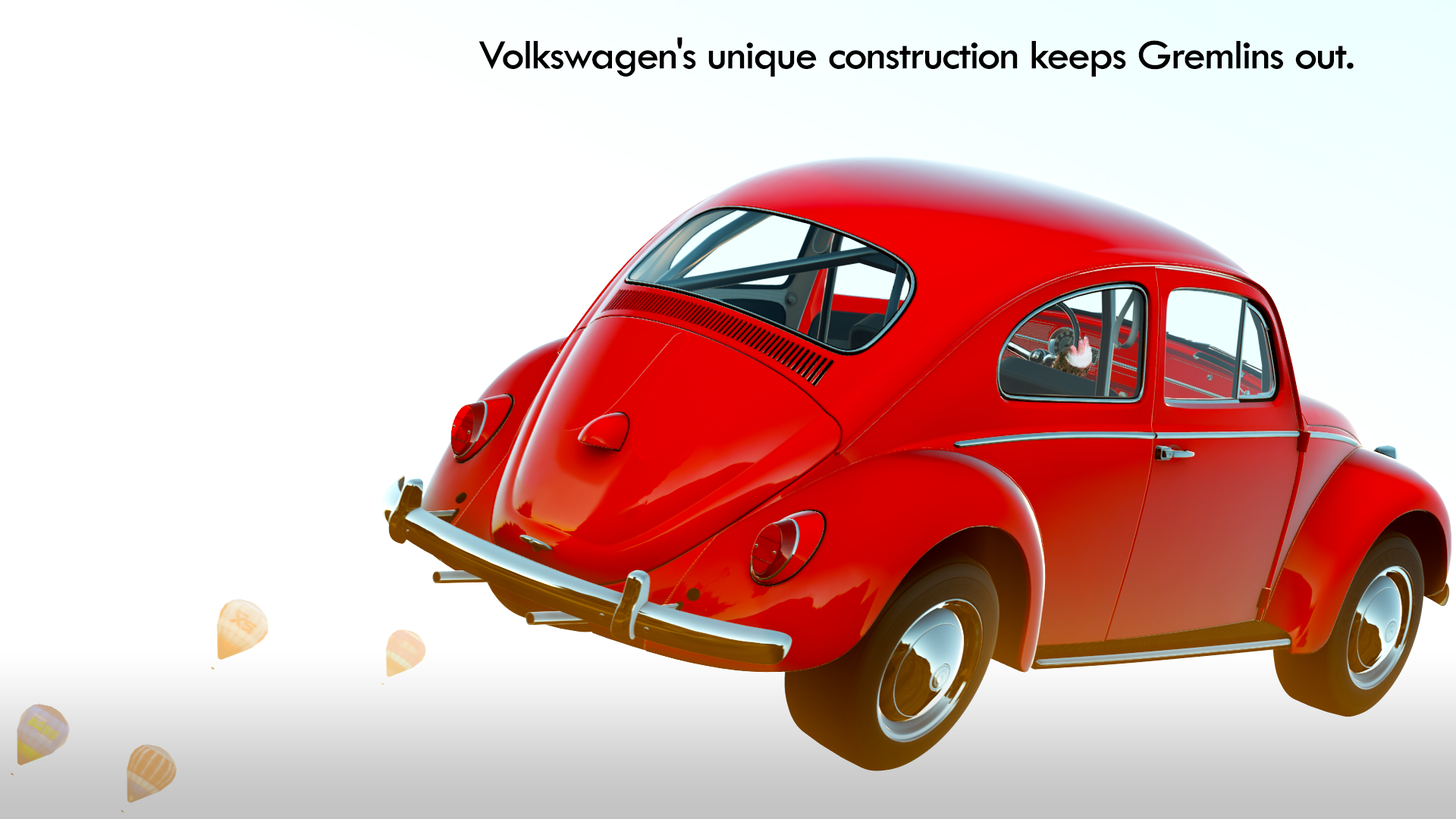
<style>
.page{position:relative;width:1456px;height:819px;background:#ffffff}
.page>*{position:absolute;margin:0}
.t1{font:42.8px "TwCenMT-Regular";letter-spacing:-0.05em;color:#000000;font-weight:bold;scale:1.06 1}
</style>
<div class="page">
<p class="t1" style="left:479px;top:37px;width:875px;height:40px">Volkswagen's unique construction keeps Gremlins out.</p>
</div>
